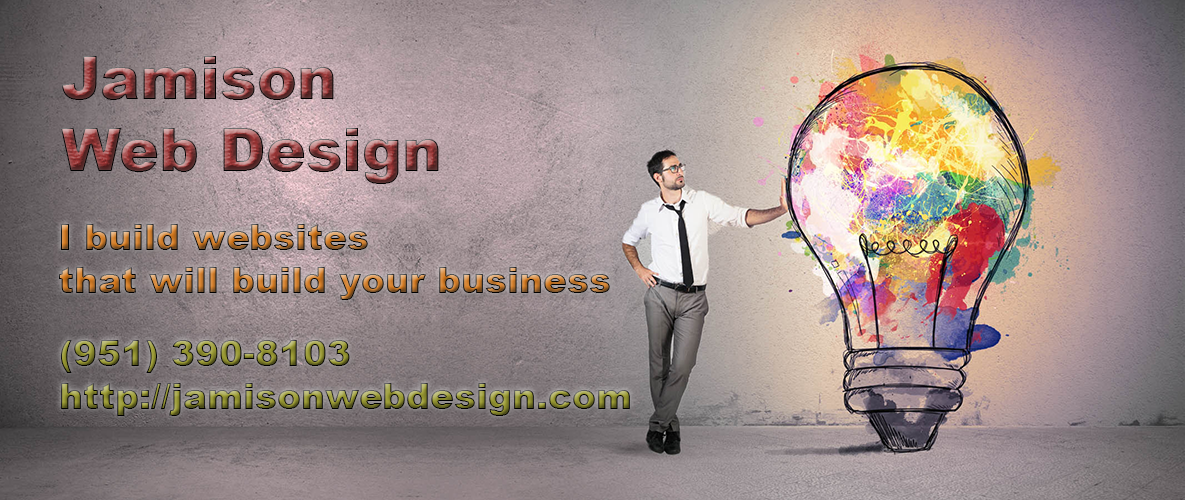
<style>
.page{position:relative;width:1185px;height:500px}
.page>*{position:absolute;margin:0}
.t1{font:60px "Arial-Black"}
.t2{font:36px "Arial-Black"}
</style>
<div class="page">
<p class="t1" style="left:61px;top:56px;width:378px;height:128px">Jamison <br>Web Design</p>
<p class="t2" style="left:59px;top:224px;width:551px;height:76px">I build websites<br>that will build your business</p>
<p class="t2" style="left:61px;top:340px;width:569px;height:76px">(951) 390-8103<br>http://jamisonwebdesign.com</p>
</div>
